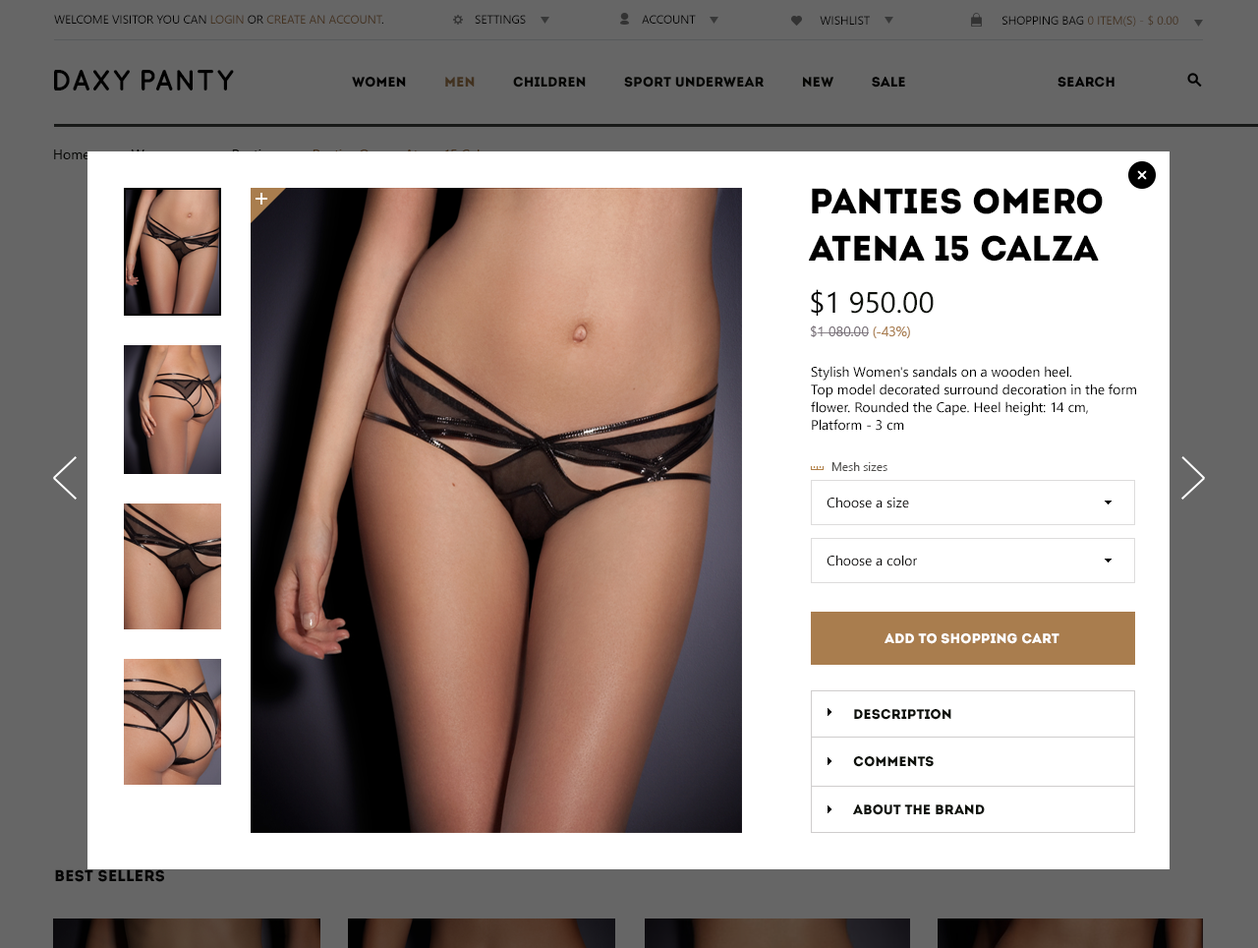
<style>
.page{position:relative;width:1258px;height:948px;background:#ffffff}
.page>*{position:absolute;margin:0}
.t1{font:35.4px/47.2px "Intro";color:#000000}
.t2{font:29.5px "SegoeUI";letter-spacing:0.01em;color:#0e110b;text-transform:uppercase}
.t3{font:29.5px "SegoeUI";color:#000000}
.t4{font:13.8px "SegoeUI";color:#787078}
.t5{font:13.8px "SegoeUI";color:#a97d4e}
.t6{font:13.8px/17.7px "SegoeUI";color:#000000}
.t7{font:11.8px "SegoeUI";color:#52514f}
.t8{font:13.8px "SegoeUI";color:#0f0e0e}
.t9{font:13.8px "Intro";color:#ffffff;text-transform:uppercase}
.t10{font:13.8px "Intro";color:#0e110b;text-transform:uppercase}
</style>
<div class="page">
<p class="t1" style="left:809px;top:188px;width:294px;height:73px">Panties Omero <br>Atena 15 Calza</p>
<p class="t2" style="left:811px;top:289px;width:123px;height:27px"><span class="t3">$1 </span>950.00</p>
<p class="t4" style="left:811px;top:325px;width:99px;height:13px">$1 080.00 <span class="t5">(-43%)</span></p>
<p class="t6" style="left:811px;top:366px;width:325px;height:65px">Stylish Women's sandals on a wooden heel. <br>Top model decorated surround decoration in the form <br>flower. Rounded the Cape. Heel height: 14 cm, <br>Platform - 3 cm</p>
<p class="t7" style="left:832px;top:462px;width:56px;height:9px">Mesh sizes</p>
<p class="t8" style="left:827px;top:496px;width:82px;height:12px">Choose a size</p>
<p class="t8" style="left:827px;top:554px;width:90px;height:12px">Choose a color</p>
<p class="t9" style="left:885px;top:633px;width:175px;height:11px">Add to Shopping Cart</p>
<p class="t10" style="left:854px;top:709px;width:98px;height:11px">description</p>
<p class="t10" style="left:853px;top:756px;width:81px;height:11px">Comments</p>
<p class="t10" style="left:853px;top:804px;width:132px;height:11px">About the brand</p>
</div>
